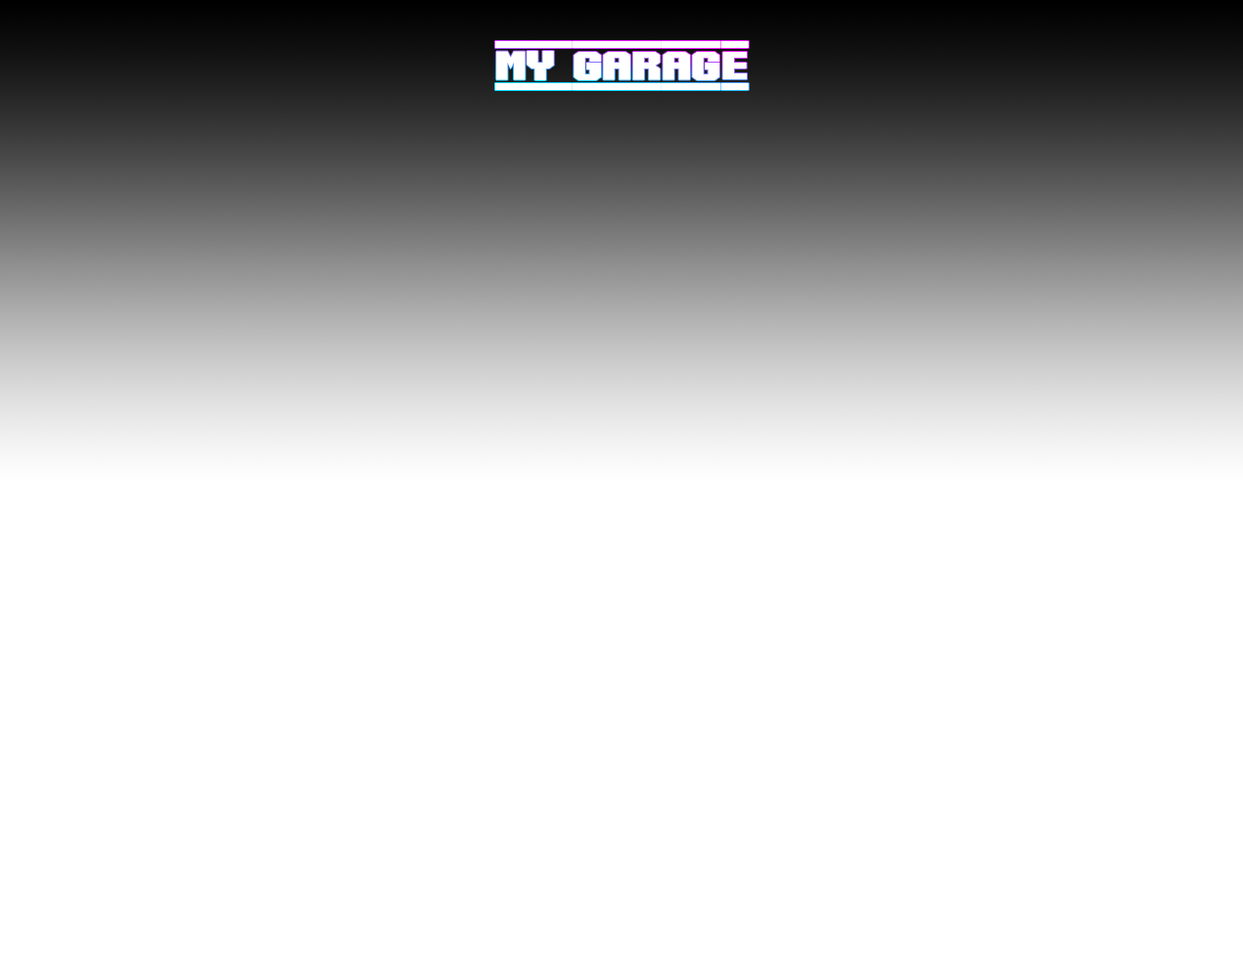
<style>
.page{position:relative;width:1243px;height:959px;background:#ffffff}
.page>*{position:absolute;margin:0}
.t1{font:70.5px "SpeedRacing-Regular";color:#ffffff}
</style>
<div class="page">
<p class="t1" style="left:495px;top:41px;width:254px;height:49px">MY GARAGE</p>
</div>
